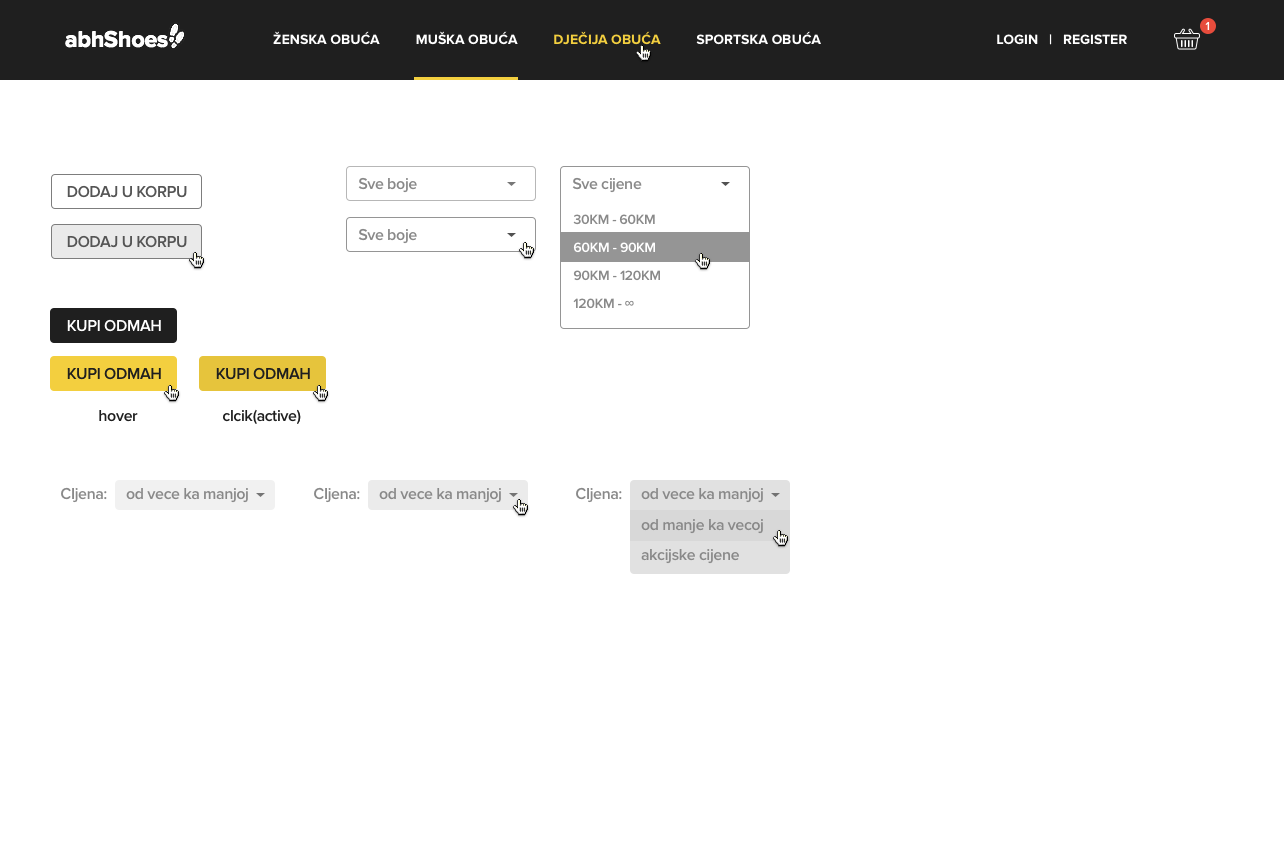
<style>
.page{position:relative;width:1284px;height:859px;background:#ffffff}
.page>*{position:absolute;margin:0}
.t1{font:23px "ProximaNova-Bold";color:#ffffff}
.t2{font:12px "ProximaNova-Semibold";letter-spacing:-0.025em;color:#ffffff}
.t3{font:14px "ProximaNova-Bold";color:#ffffff}
.t4{font:14px "ProximaNova-Bold";color:#f3cf3f}
.t5{font:16px "ProximaNova-Semibold";letter-spacing:-0.025em;color:#555555}
.t6{font:16px "ProximaNova-Semibold";letter-spacing:-0.025em;color:#898989}
.t7{font:16px "ProximaNova-Semibold";letter-spacing:-0.025em;color:#ffffff}
.t8{font:16px "ProximaNova-Semibold";letter-spacing:-0.025em;color:#1f1f1f}
</style>
<div class="page">
<p class="t1" style="left:65px;top:30px;width:103px;height:18px">abhShoes</p>
<p class="t2" style="left:1205px;top:22px;width:5px;height:8px">1</p>
<p class="t3" style="left:273px;top:31px;width:854px;height:14px">ŽENSKA OBUĆA          MUŠKA OBUĆA          <span class="t4">DJEČIJA OBUĆA</span>          SPORTSKA OBUĆA                                                 LOGIN   |   REGISTER</p>
<p class="t5" style="left:67px;top:185px;width:120px;height:13px">DODAJ U KORPU</p>
<p class="t6" style="left:358px;top:177px;width:59px;height:16px">Sve boje</p>
<p class="t6" style="left:572px;top:177px;width:70px;height:16px">Sve cijene</p>
<p class="t6" style="left:358px;top:228px;width:59px;height:16px">Sve boje</p>
<p class="t5" style="left:67px;top:235px;width:120px;height:13px">DODAJ U KORPU</p>
<p class="t7" style="left:67px;top:319px;width:94px;height:13px">KUPI ODMAH</p>
<p class="t8" style="left:67px;top:367px;width:94px;height:13px">KUPI ODMAH</p>
<p class="t8" style="left:216px;top:367px;width:94px;height:13px">KUPI ODMAH</p>
<p class="t8" style="left:99px;top:410px;width:39px;height:12px">hover</p>
<p class="t8" style="left:223px;top:409px;width:78px;height:15px">clcik(active)</p>
<p class="t6" style="left:61px;top:487px;width:46px;height:16px">CIjena:</p>
<p class="t6" style="left:126px;top:488px;width:122px;height:15px">od vece ka manjoj</p>
<p class="t6" style="left:314px;top:487px;width:46px;height:16px">CIjena:</p>
<p class="t6" style="left:379px;top:488px;width:122px;height:15px">od vece ka manjoj</p>
<p class="t6" style="left:576px;top:487px;width:46px;height:16px">CIjena:</p>
<p class="t6" style="left:641px;top:488px;width:122px;height:15px">od vece ka manjoj</p>
<p class="t6" style="left:641px;top:519px;width:122px;height:15px">od manje ka vecoj</p>
<p class="t6" style="left:641px;top:549px;width:98px;height:15px">akcijske cijene</p>
</div>
